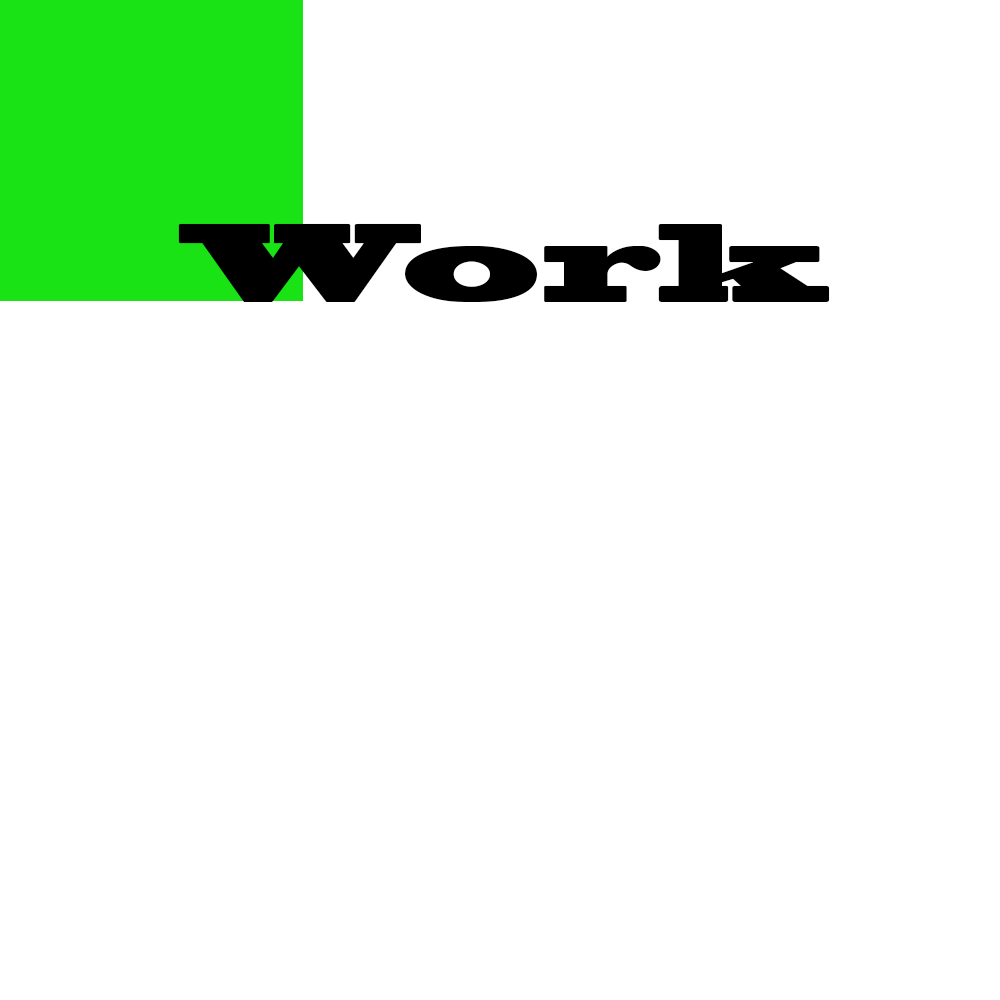
<style>
.page{position:relative;width:1000px;height:1000px;background:#ffffff}
.page>*{position:absolute;margin:0}
.t1{font:104.2px "BlackoakStd";color:#000000}
</style>
<div class="page">
<p class="t1" style="left:178px;top:223px;width:652px;height:79px">Work</p>
</div>
